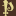
<style>
.page{position:relative;width:16px;height:16px;background:#4b3124}
.page>*{position:absolute;margin:0}
.t1{font:20px "SaberRegular";letter-spacing:-0.015em;color:#e4da92}
</style>
<div class="page">
<p class="t1" style="left:2px;top:0px;width:12px;height:17px">P</p>
</div>
